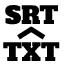
<style>
.page{position:relative;width:64px;height:64px;background:#ffffff}
.page>*{position:absolute;margin:0}
.t1{font:24px "AlfaSlabOne-Regular";color:#000000}
</style>
<div class="page">
<p class="t1" style="left:5px;top:4px;width:53px;height:21px">SRT</p>
<p class="t1" style="left:3px;top:42px;width:57px;height:19px">TXT</p>
</div>
